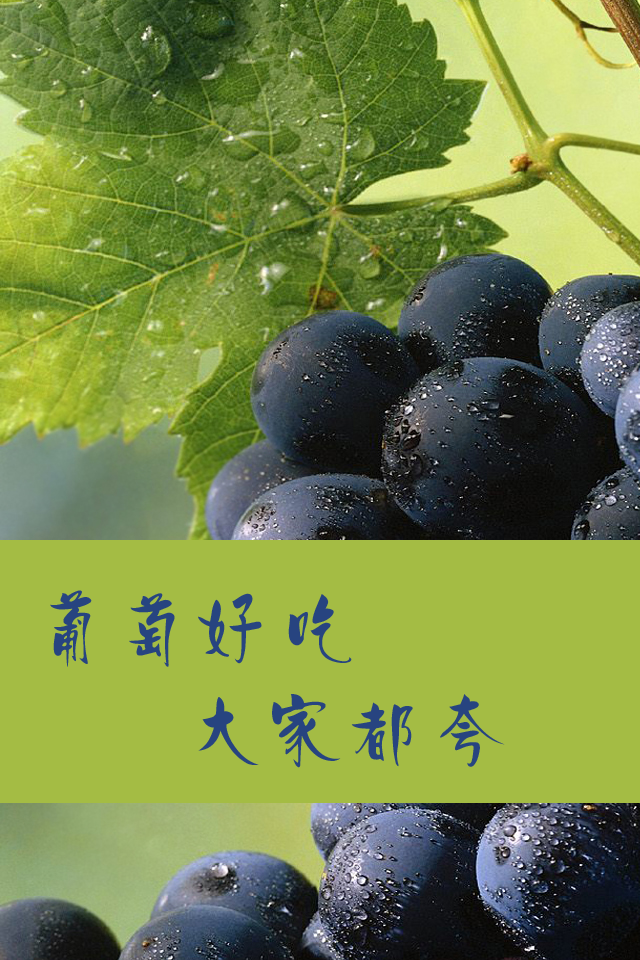
<style>
.page{position:relative;width:640px;height:960px;background:#a4bc44}
.page>*{position:absolute;margin:0}
.t1{font:81.5px "¾­µä·±ÖÐ±ä Regular";color:#274480}
</style>
<div class="page">
<p class="t1" style="left:50px;top:590px;width:302px;height:77px">葡萄好吃</p>
<p class="t1" style="left:198px;top:694px;width:307px;height:74px">大家都夸</p>
</div>
